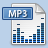
<style>
.page{position:relative;width:48px;height:48px;background:#bbd1e9}
.page>*{position:absolute;margin:0}
.t1{font:10px "MyriadWebPro";color:#ffffff;text-transform:uppercase}
</style>
<div class="page">
<p class="t1" style="left:8px;top:9px;width:19px;height:8px">MP3</p>
</div>
